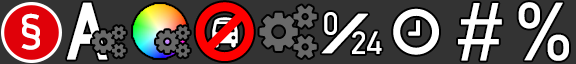
<style>
.page{position:relative;width:576px;height:64px;background:#333333}
.page>*{position:absolute;margin:0}
.t1{font:84px "HighwayGothic";color:#ffffff;font-weight:bold;scale:0.84 1}
.t2{font:85.7px "Gidole-Regular";letter-spacing:-0.64em;color:#ffffff;font-weight:bold}
.t3{font:52px "Gidole-Regular";color:#ffffff;font-weight:bold}
.t4{font:32.1px "Gidole-Regular";color:#ffffff;font-weight:bold}
.t5{font:32.1px "Gidole-Regular";letter-spacing:-0.64em;color:#ffffff;font-weight:bold}
.t6{font:44px "Gidole-Regular";letter-spacing:-0.16em;color:#ffffff;font-weight:bold;scale:3.44 1}
</style>
<div class="page">
<p class="t1" style="left:67px;top:2px;width:41px;height:58px">A</p>
<p class="t2" style="left:458px;top:3px;width:44px;height:58px">#</p>
<p class="t2" style="left:518px;top:2px;width:51px;height:59px">%</p>
<p class="t3" style="left:21px;top:13px;width:19px;height:37px">§</p>
<p class="t4" style="left:321px;top:12px;width:61px;height:42px"><span class="t5">0</span><span class="t6">/</span>24</p>
</div>
